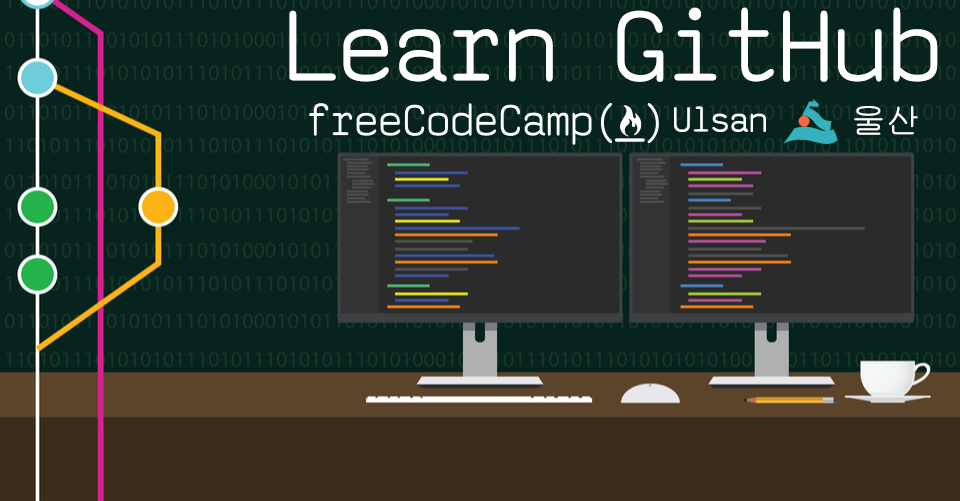
<style>
.page{position:relative;width:960px;height:501px;background:#06231e}
.page>*{position:absolute;margin:0}
.t1{font:102.2px "saxMono";color:#ffffff}
.t2{font:35.5px "saxMono";color:#ffffff}
.t3{font:35.5px "Gulim";color:#ffffff}
</style>
<div class="page">
<p class="t1" style="left:289px;top:7px;width:649px;height:75px">Learn GitHub</p>
<p class="t2" style="left:674px;top:106px;width:92px;height:26px">Ulsan</p>
<p class="t3" style="left:854px;top:105px;width:64px;height:30px">울산</p>
</div>
